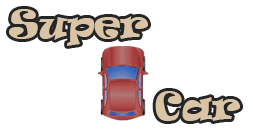
<style>
.page{position:relative;width:253px;height:136px;background:#ffffff}
.page>*{position:absolute;margin:0}
.t1{font:36px "Ravie";color:#d9c4a6}
</style>
<div class="page">
<p class="t1" style="left:9px;top:9px;width:139px;height:37px">Super</p>
<p class="t1" style="left:155px;top:91px;width:85px;height:30px">Car</p>
</div>
